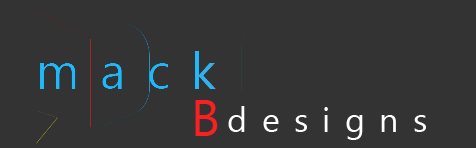
<style>
.page{position:relative;width:476px;height:148px;background:#333333}
.page>*{position:absolute;margin:0}
.t1{font:50px "SegoeUIHistoric";letter-spacing:0.42em;color:#f82020}
.t2{font:34px "SegoeUIHistoric";letter-spacing:0.42em;color:#ffffff}
</style>
<div class="page">
<p class="t1" style="left:195px;top:100px;width:23px;height:36px">B</p>
<p class="t2" style="left:228px;top:106px;width:198px;height:34px">designs</p>
</div>
